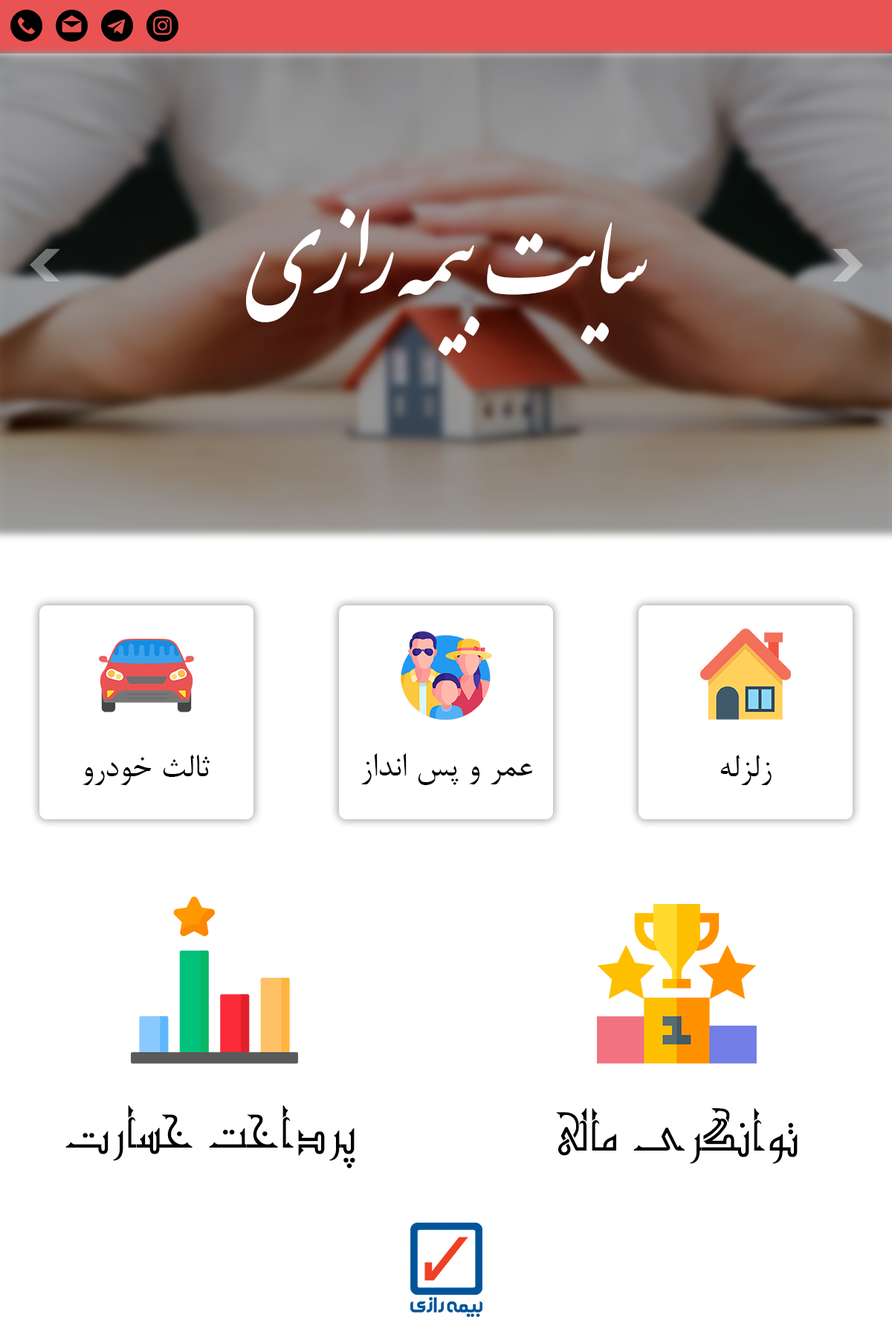
<style>
.page{position:relative;width:892px;height:1337px;background:#ffffff}
.page>*{position:absolute;margin:0}
.t1{font:156.8px "IranNastaliq";color:#ffffff}
.t2{font:37.1px "BNazanin";color:#000000}
.t3{font:52px "Mj_Granada";color:#000000}
</style>
<div class="page">
<p class="t1" style="left:246px;top:208px;width:401px;height:148px">سایت بیمه رازی</p>
<p class="t2" style="left:82px;top:754px;width:128px;height:31px">ثالث خودرو</p>
<p class="t2" style="left:360px;top:753px;width:173px;height:32px">عمر و پس انداز</p>
<p class="t2" style="left:720px;top:755px;width:51px;height:30px">زلزله</p>
<p class="t3" style="left:65px;top:1106px;width:290px;height:63px">پرداخت خسارت</p>
<p class="t3" style="left:556px;top:1109px;width:241px;height:55px">توانگری مالی</p>
</div>
